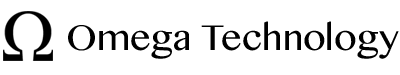
<style>
.page{position:relative;width:400px;height:75px;background:#ffffff}
.page>*{position:absolute;margin:0}
.t1{font:36px "MyanmarMN";color:#000000}
</style>
<div class="page">
<p class="t1" style="left:68px;top:21px;width:331px;height:38px">Omega Technology</p>
</div>
